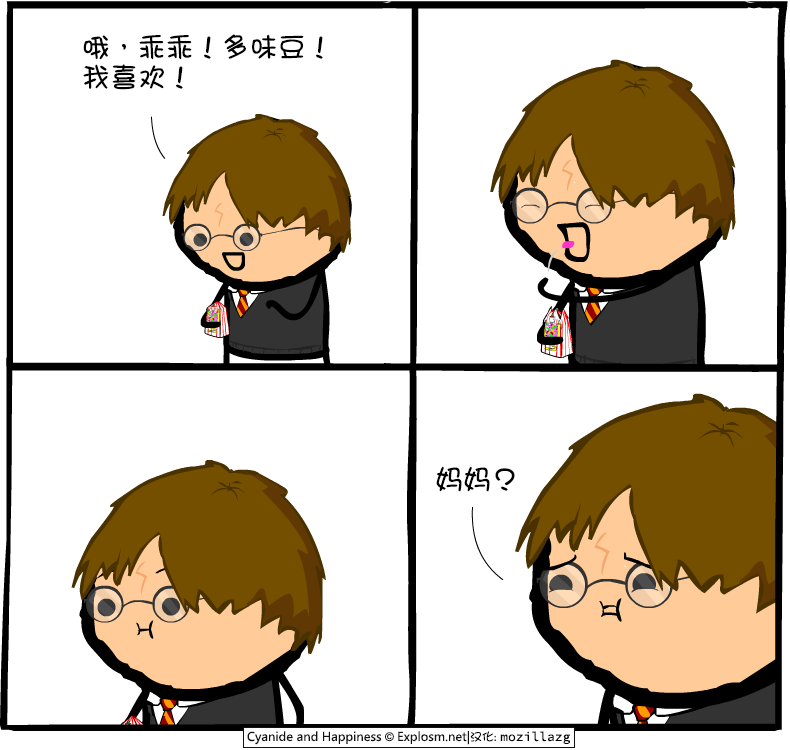
<style>
.page{position:relative;width:790px;height:750px;background:#ffffff}
.page>*{position:absolute;margin:0}
.t1{font:28px/30px "DFGirl";color:#000000}
.t2{font:28px "DFGirl";color:#000000}
</style>
<div class="page">
<p class="t1" style="left:83px;top:34px;width:240px;height:56px">哦，乖乖！多味豆！<br>我喜欢！</p>
<p class="t2" style="left:436px;top:466px;width:79px;height:26px">妈妈？</p>
</div>
